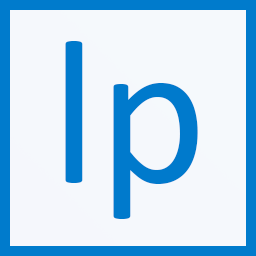
<style>
.page{position:relative;width:256px;height:256px;background:#f5f8fc}
.page>*{position:absolute;margin:0}
.t1{font:208.3px "Calibri";color:#007acc}
</style>
<div class="page">
<p class="t1" style="left:65px;top:41px;width:133px;height:178px">lp</p>
</div>
